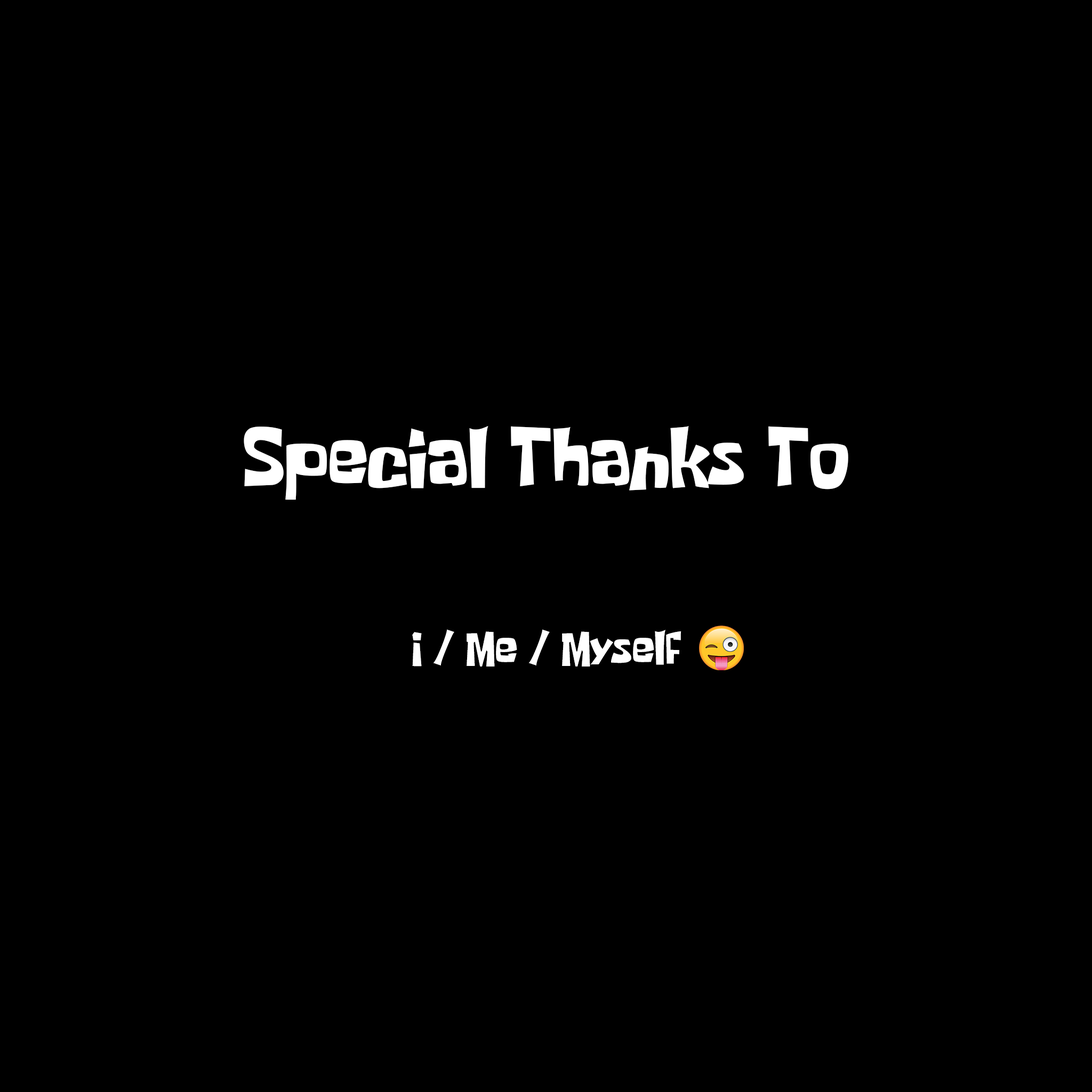
<style>
.page{position:relative;width:1092px;height:1092px;background:#000000}
.page>*{position:absolute;margin:0}
.t1{font:68.4px "SpongeboyMeBob";color:#ffffff}
.t2{font:38.4px "SpongeboyMeBob";color:#ffffff}
</style>
<div class="page">
<p class="t1" style="left:244px;top:425px;width:604px;height:75px">Special Thanks To</p>
<p class="t2" style="left:412px;top:629px;width:269px;height:37px">I / Me / Myself</p>
</div>
